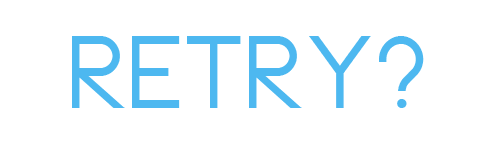
<style>
.page{position:relative;width:500px;height:150px;background:#ffffff}
.page>*{position:absolute;margin:0}
.t1{font:100px "Neou-Bold";color:#4db8f0}
</style>
<div class="page">
<p class="t1" style="left:72px;top:36px;width:352px;height:72px">retry?</p>
</div>
